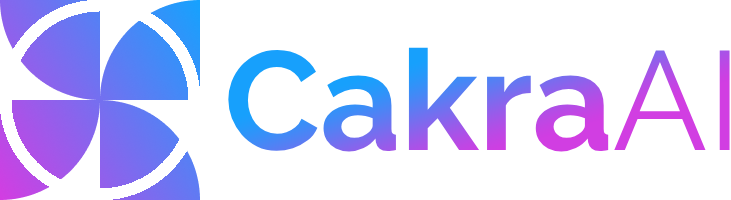
<style>
.page{position:relative;width:731px;height:200px;background:#ffffff}
.page>*{position:absolute;margin:0}
.t1{font:140px "Raleway-Bold"}
.t2{font:140px "Raleway-Regular"}
</style>
<div class="page">
<p class="t1" style="left:228px;top:47px;width:502px;height:105px">Cakra<span class="t2">AI</span></p>
</div>
